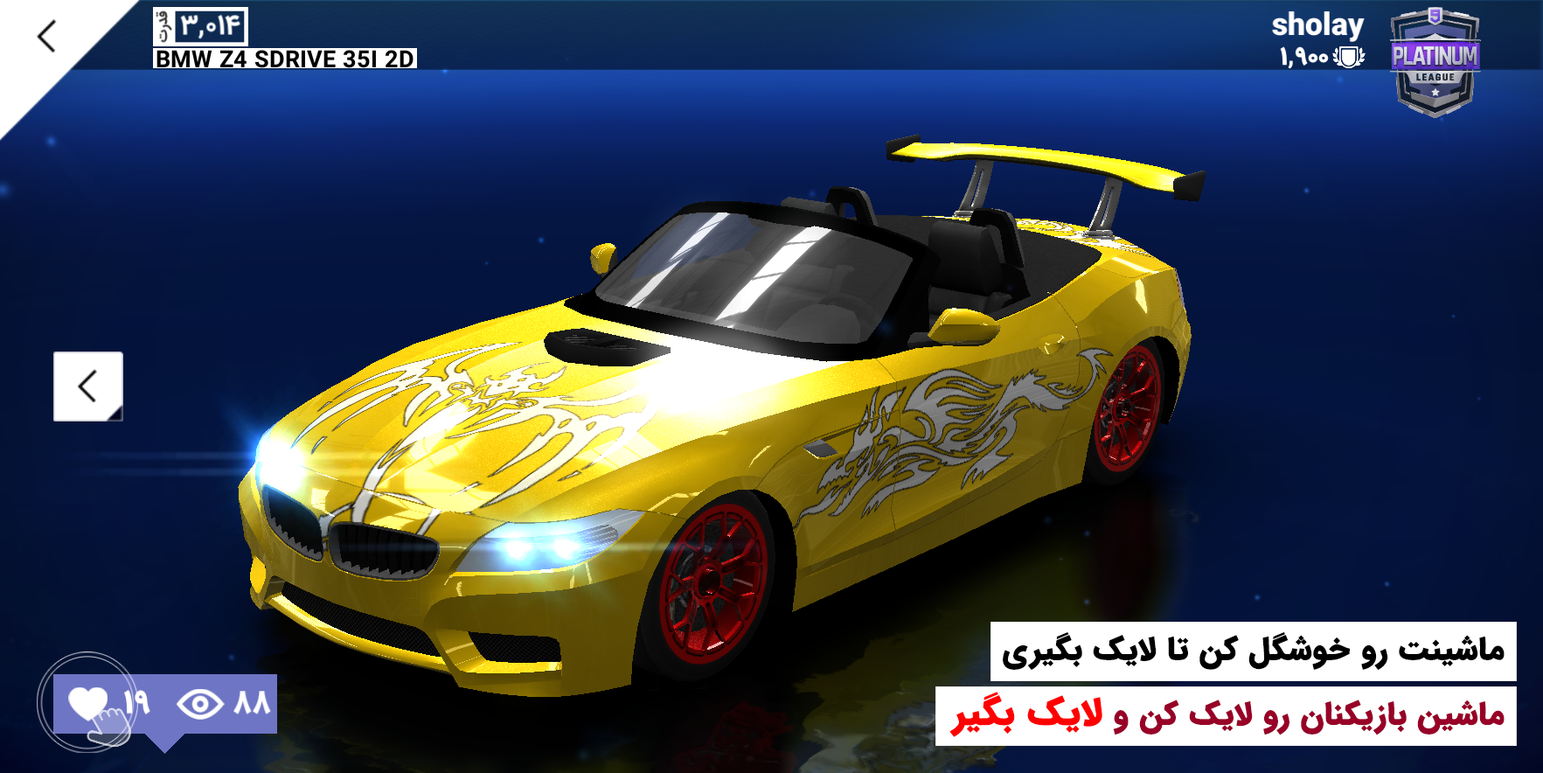
<style>
.page{position:relative;width:1543px;height:773px}
.page>*{position:absolute;margin:0}
.t1{font:31.5px "IRANSansMobile-Black";color:#000000;font-weight:bold}
.t2{font:31.5px "IRANSansMobile-Black";color:#980027;font-weight:bold}
.t3{font:37.4px "IRANSansMobile-Black";color:#ff0000;font-weight:bold}
</style>
<div class="page">
<p class="t1" style="left:1003px;top:632px;width:502px;height:38px">ماشینت رو خوشگل کن تا لایک بگیری</p>
<p class="t2" style="left:949px;top:692px;width:556px;height:45px">ماشین بازیکنان رو لایک کن و <span class="t3">لایک بگیر</span></p>
</div>
